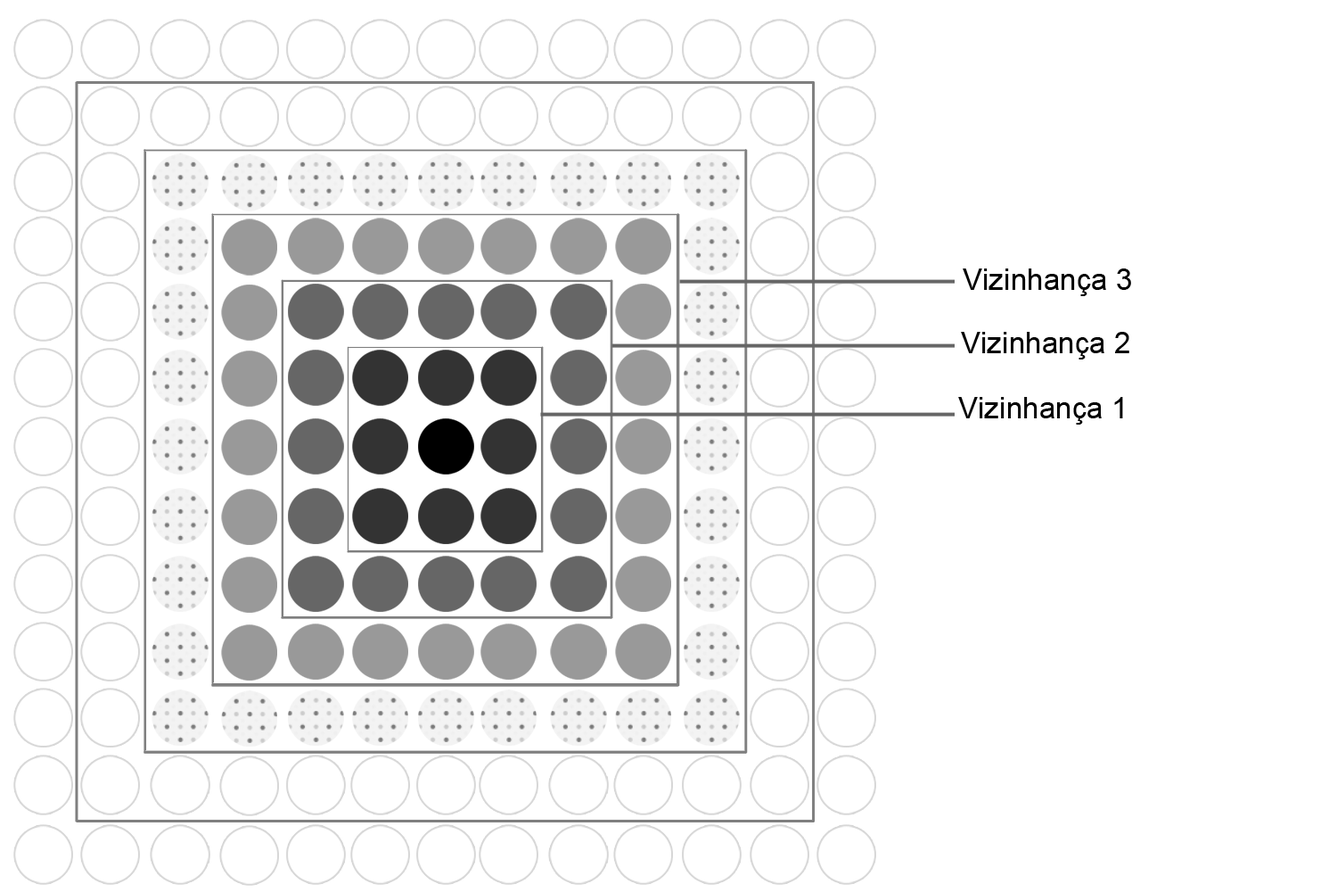
<style>
.page{position:relative;width:1337px;height:892px;background:#ffffff}
.page>*{position:absolute;margin:0}
.t1{font:29.7px "ArialMT";color:#000000}
</style>
<div class="page">
<p class="t1" style="left:963px;top:268px;width:168px;height:28px">Vizinhança 3</p>
<p class="t1" style="left:961px;top:332px;width:169px;height:27px">Vizinhança 2</p>
<p class="t1" style="left:958px;top:397px;width:165px;height:27px">Vizinhança 1</p>
</div>
